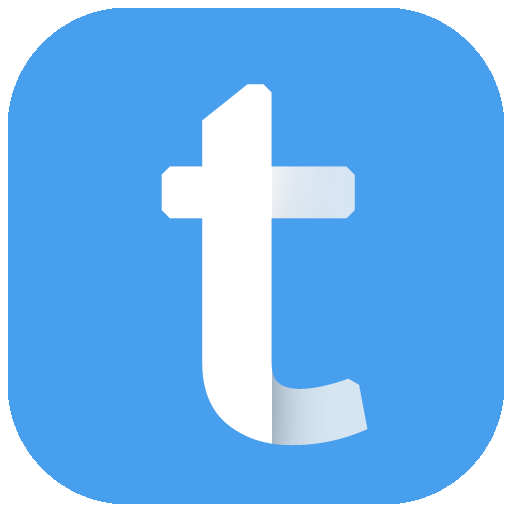
<style>
.page{position:relative;width:512px;height:512px;background:#489fee}
.page>*{position:absolute;margin:0}
.t1{font:560px "AverageSans-Regular";color:#ffffff;font-weight:bold;scale:1.15 1}
</style>
<div class="page">
<p class="t1" style="left:161px;top:84px;width:207px;height:362px">t</p>
</div>
